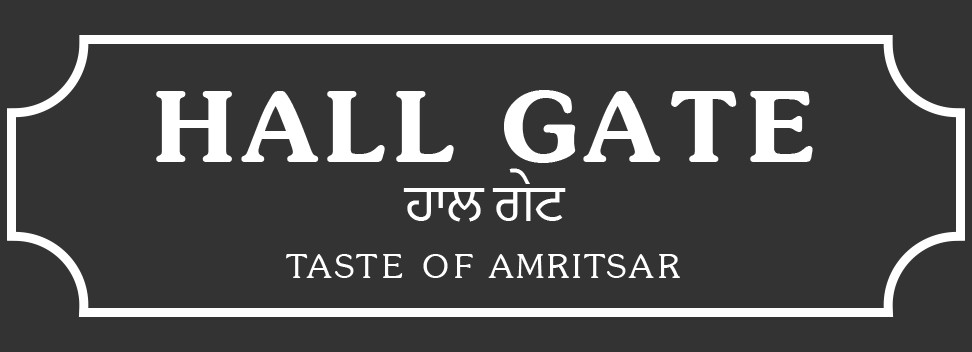
<style>
.page{position:relative;width:972px;height:352px;background:#333333}
.page>*{position:absolute;margin:0}
.t1{font:98.6px "Sunset-Serial-Bold";letter-spacing:0.09em;color:#ffffff;text-transform:uppercase}
.t2{font:98.6px "Sunset-Serial-Bold";letter-spacing:0.26em;color:#ffffff;text-transform:uppercase}
.t3{font:98.6px "Sunset-Serial-Bold";letter-spacing:0.12em;color:#ffffff;text-transform:uppercase}
.t4{font:57px "MuktaMahee-Regular";letter-spacing:-0.02em;color:#ffffff;text-transform:uppercase}
.t5{font:33.3px "Sunset-Serial-Light-Regular";letter-spacing:0.14em;color:#ffffff;text-transform:uppercase}
.t6{font:33.3px "Sunset-Serial-Light-Regular";letter-spacing:0.08em;color:#ffffff;text-transform:uppercase}
.t7{font:33.3px "Sunset-Serial-Light-Regular";letter-spacing:0.12em;color:#ffffff;text-transform:uppercase}
</style>
<div class="page">
<p class="t1" style="left:156px;top:90px;width:657px;height:73px">Hall G<span class="t2">a</span><span class="t3">te</span></p>
<p class="t4" style="left:403px;top:168px;width:163px;height:54px">ਹਾਲ ਗੇਟ</p>
<p class="t5" style="left:286px;top:254px;width:394px;height:24px">Taste of<span class="t6"> amrit</span><span class="t7">sar</span></p>
</div>
